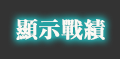
<style>
.page{position:relative;width:120px;height:59px;background:#333333}
.page>*{position:absolute;margin:0}
.t1{font:22px "RyuminPr6N-ExBold";color:#fbf8f3;font-weight:bold}
</style>
<div class="page">
<p class="t1" style="left:16px;top:19px;width:89px;height:21px">顯示戰績</p>
</div>
